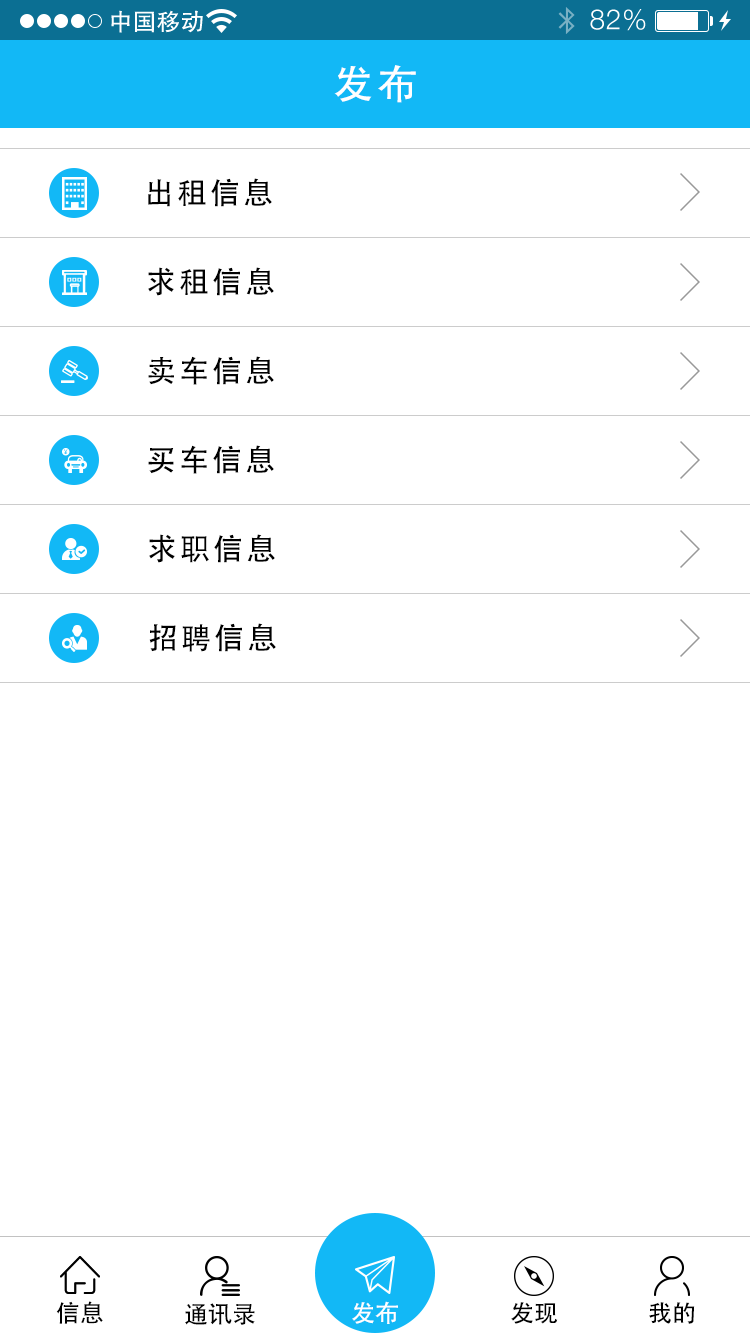
<style>
.page{position:relative;width:750px;height:1334px;background:#ffffff}
.page>*{position:absolute;margin:0}
.t1{font:40px "AdobeHeitiStd-Regular";letter-spacing:0.104em;color:#ffffff}
.t2{font:30px "AdobeHeitiStd-Regular";letter-spacing:0.104em;color:#000000}
.t3{font:24px "AdobeHeitiStd-Regular";color:#000000}
.t4{font:24px "AdobeHeitiStd-Regular";color:#ffffff}
</style>
<div class="page">
<p class="t1" style="left:334px;top:65px;width:82px;height:38px">发布</p>
<p class="t2" style="left:148px;top:178px;width:124px;height:29px">出租信息</p>
<p class="t2" style="left:148px;top:267px;width:126px;height:29px">求租信息</p>
<p class="t2" style="left:148px;top:356px;width:126px;height:29px">卖车信息</p>
<p class="t2" style="left:148px;top:445px;width:126px;height:29px">买车信息</p>
<p class="t2" style="left:149px;top:534px;width:126px;height:29px">求职信息</p>
<p class="t2" style="left:149px;top:623px;width:127px;height:29px">招聘信息</p>
<p class="t3" style="left:56px;top:1301px;width:47px;height:23px">信息</p>
<p class="t4" style="left:352px;top:1301px;width:46px;height:23px">发布</p>
<p class="t3" style="left:511px;top:1302px;width:47px;height:22px">发现</p>
<p class="t3" style="left:649px;top:1302px;width:46px;height:22px">我的</p>
<p class="t3" style="left:185px;top:1303px;width:70px;height:22px">通讯录</p>
</div>
